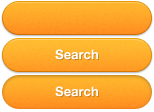
<style>
.page{position:relative;width:154px;height:112px}
.page>*{position:absolute;margin:0}
.t1{font:13px "HelveticaNeue-Bold";color:#ffffff}
</style>
<div class="page">
<p class="t1" style="left:55px;top:49px;width:43px;height:11px">Search</p>
<p class="t1" style="left:55px;top:86px;width:43px;height:11px">Search</p>
</div>
